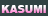
<style>
.page{position:relative;width:48px;height:16px;background:#314242}
.page>*{position:absolute;margin:0}
.t1{font:11.1px "Arial-Black";scale:0.91 1}
</style>
<div class="page">
<p class="t1" style="left:1px;top:5px;width:45px;height:8px">KASUMI</p>
</div>
